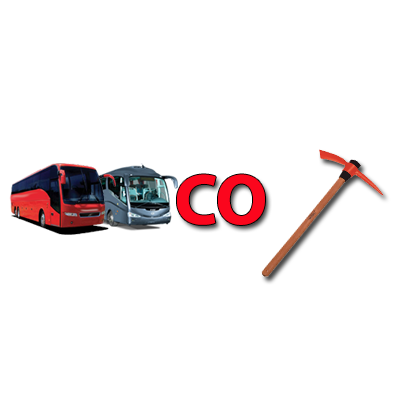
<style>
.page{position:relative;width:400px;height:400px;background:#ffffff}
.page>*{position:absolute;margin:0}
.t1{font:72px "MyriadPro-Bold";color:#fb061d}
</style>
<div class="page">
<p class="t1" style="left:177px;top:174px;width:88px;height:51px">CO</p>
</div>
